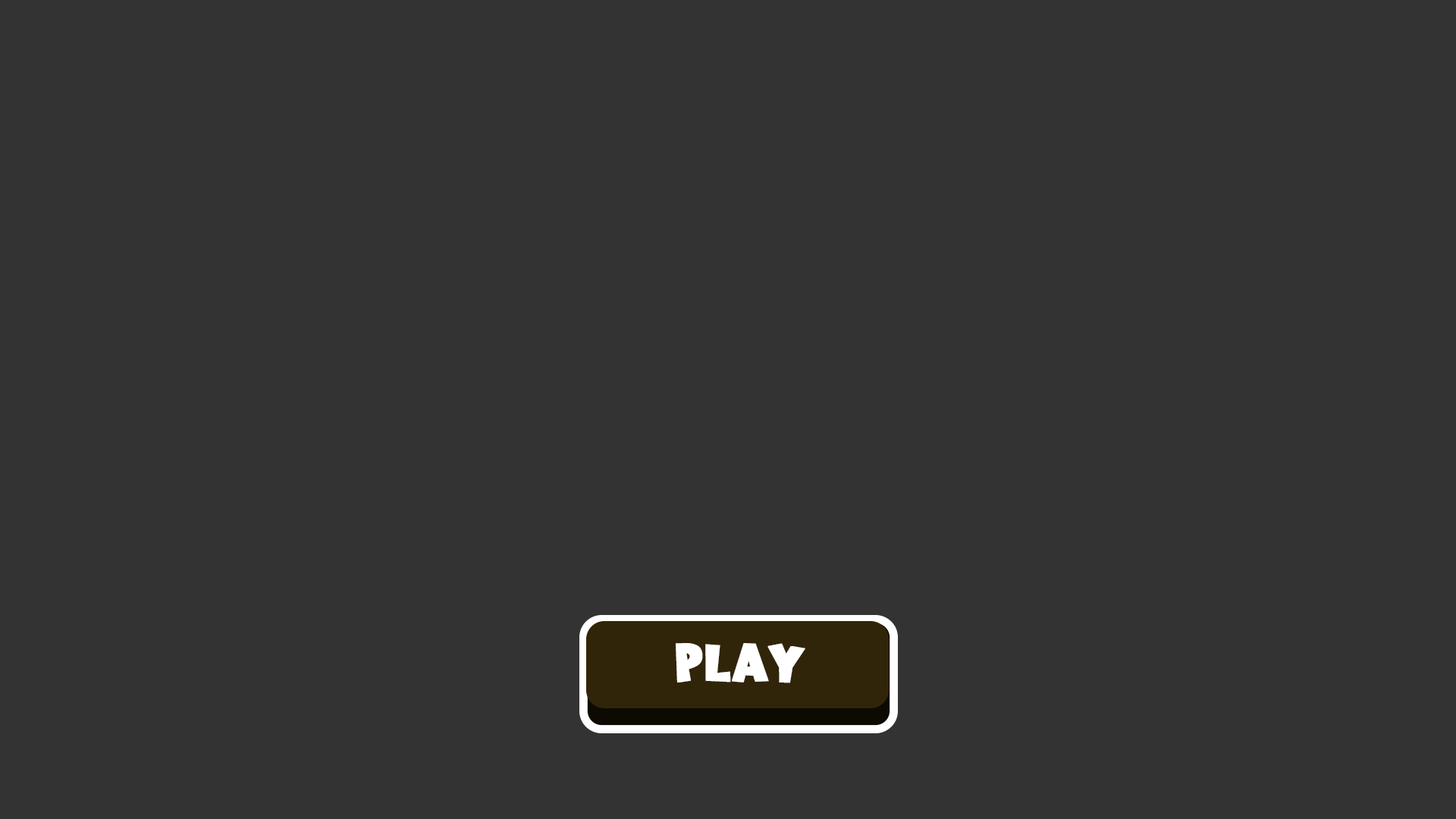
<style>
.page{position:relative;width:1456px;height:819px;background:#333333}
.page>*{position:absolute;margin:0}
.t1{font:45.5px "DinosaurRegular";letter-spacing:0.025em;color:#ffffff;font-weight:bold}
</style>
<div class="page">
<p class="t1" style="left:676px;top:643px;width:129px;height:40px">PLAY</p>
</div>
